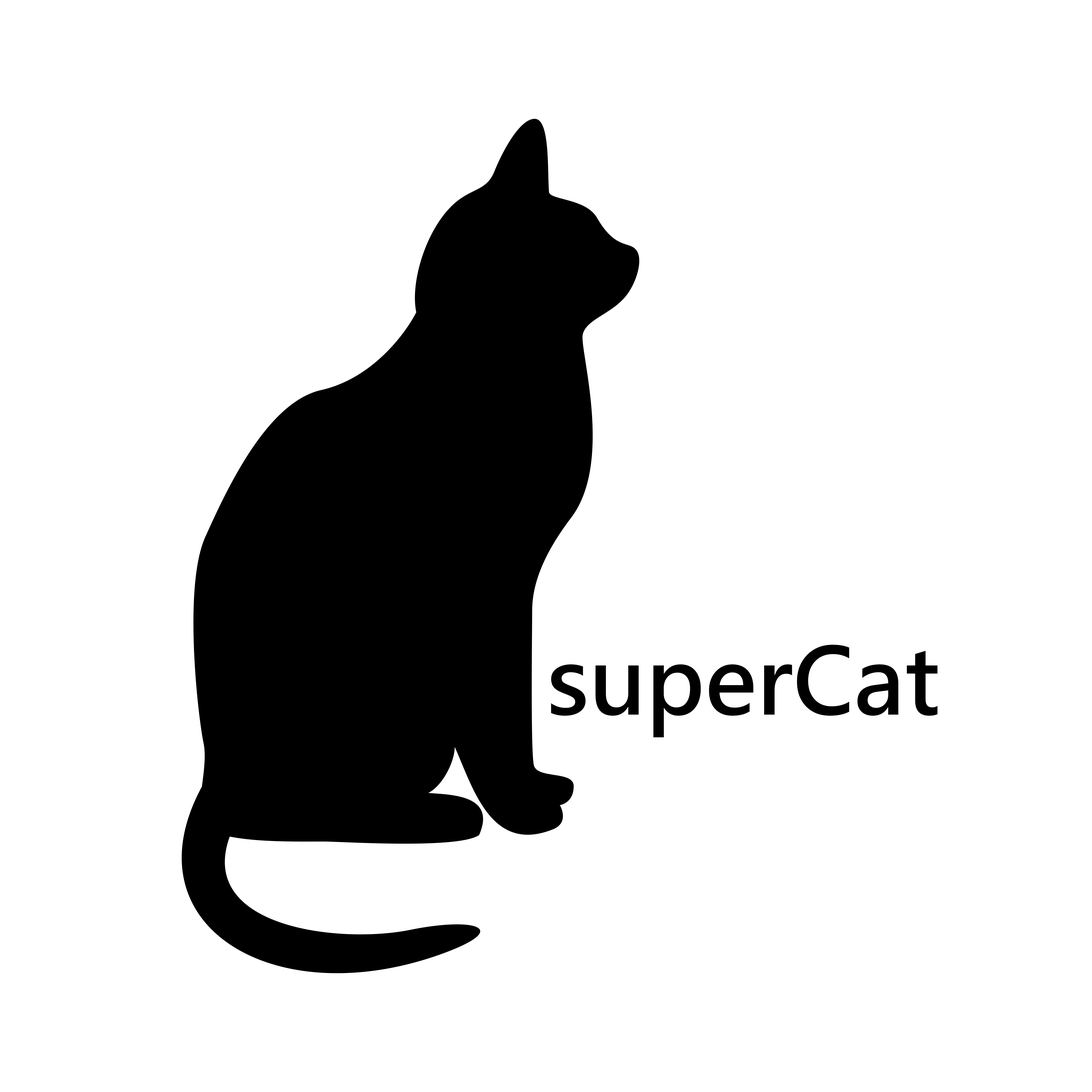
<style>
.page{position:relative;width:1092px;height:1092px;background:#ffffff}
.page>*{position:absolute;margin:0}
.t1{font:91px "MicrosoftJhengHeiBold";color:#000000}
</style>
<div class="page">
<p class="t1" style="left:551px;top:645px;width:387px;height:92px">superCat</p>
</div>
